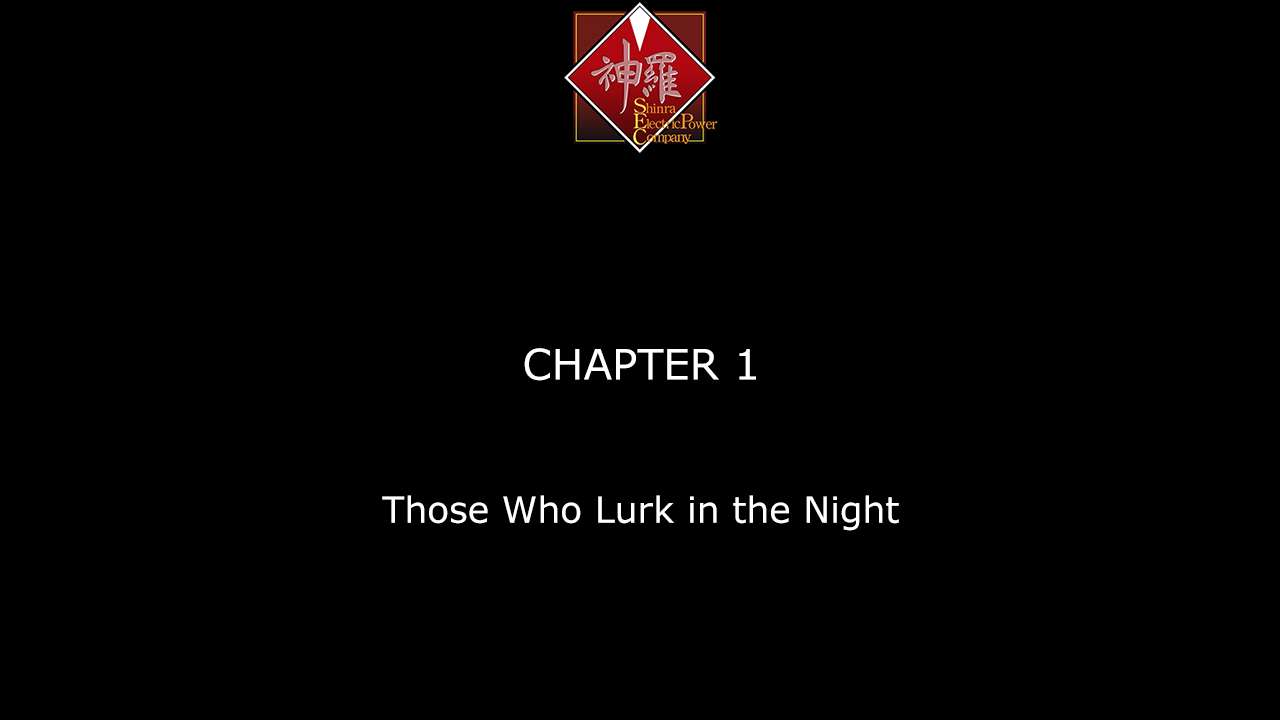
<style>
.page{position:relative;width:1280px;height:720px;background:#000000}
.page>*{position:absolute;margin:0}
.t1{font:42px "Verdana";color:#ffffff}
.t2{font:36px "Verdana";color:#ffffff}
</style>
<div class="page">
<p class="t1" style="left:524px;top:348px;width:232px;height:33px">CHAPTER 1</p>
<p class="t2" style="left:382px;top:495px;width:517px;height:36px">Those Who Lurk in the Night</p>
</div>
